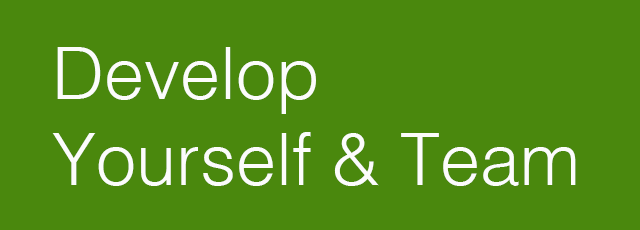
<style>
.page{position:relative;width:640px;height:230px;background:#4a880d}
.page>*{position:absolute;margin:0}
.t1{font:72px "Helvetica-Light";color:#fcfcfb}
</style>
<div class="page">
<p class="t1" style="left:52px;top:47px;width:524px;height:139px">Develop<br>Yourself &amp; Team</p>
</div>
